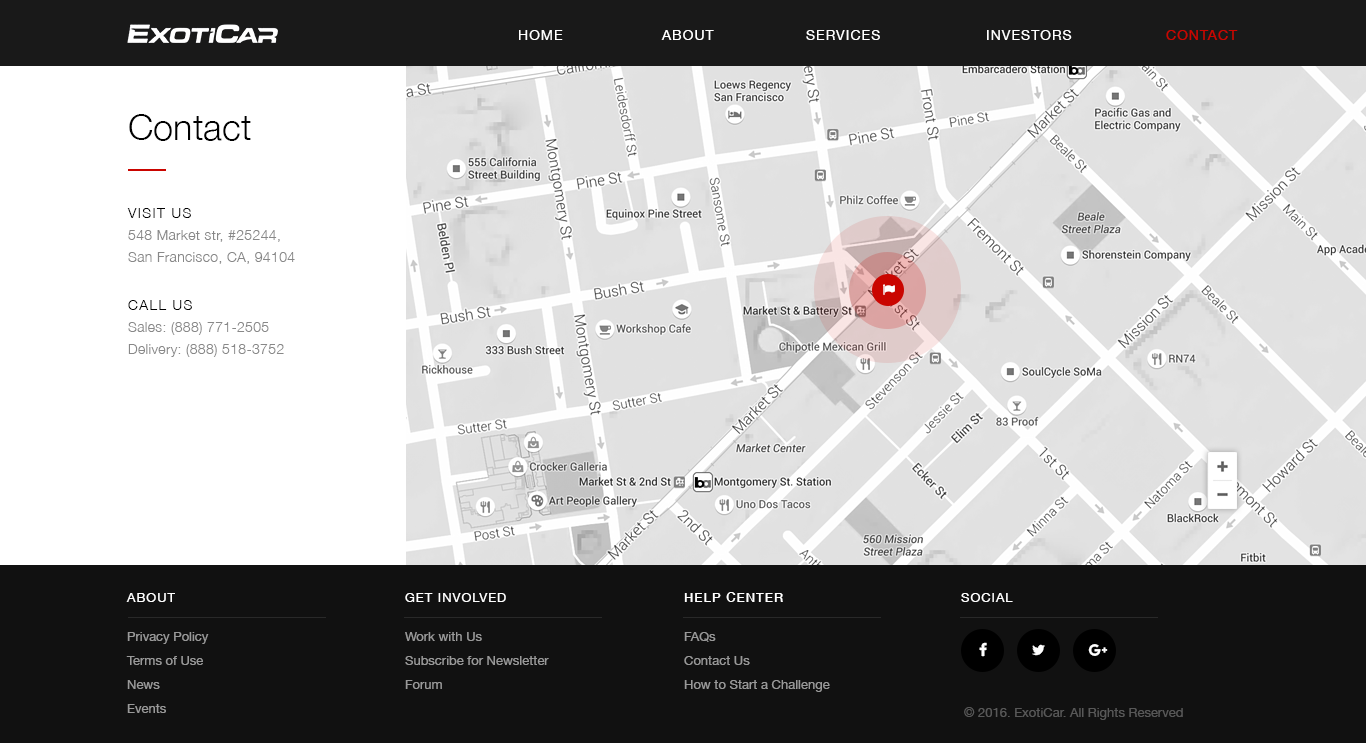
<style>
.page{position:relative;width:1366px;height:743px;background:#ffffff}
.page>*{position:absolute;margin:0}
.t1{font:14px "HelveticaNeue";letter-spacing:0.075em;color:#ffffff;text-transform:uppercase}
.t2{font:14px "HelveticaNeue";letter-spacing:0.075em;color:#ca0500;text-transform:uppercase}
.t3{font:14px/22px "HelveticaNeue-Light";letter-spacing:0.025em;color:#888888}
.t4{font:36px/24px "HelveticaNeue-Light";color:#000000}
.t5{font:14px/24px "HelveticaNeue-Light";letter-spacing:0.1em;color:#000000;text-transform:uppercase}
.t6{font:13px/24px "HelveticaNeue";color:#999999}
.t7{font:13px "HelveticaNeue";letter-spacing:0.075em;color:#ffffff;text-transform:uppercase}
.t8{font:13px "HelveticaNeue-Medium";letter-spacing:0.075em;color:#ffffff;text-transform:uppercase}
.t9{font:13px "HelveticaNeue";color:#585858}
</style>
<div class="page">
<p class="t1" style="left:519px;top:30px;width:719px;height:10px">Home   About   Services   investors   <span class="t2">Contact</span></p>
<p class="t3" style="left:127px;top:114px;width:168px;height:243px"><span class="t4">Contact<br><br></span><span class="t5">Visit us<br></span>548 Market str, #25244, <br>San Francisco, CA, 94104<br><br><span class="t5">Call us<br></span>Sales: (888) 771-2505<br>Delivery: (888) 518-3752</p>
<p class="t6" style="left:126px;top:593px;width:83px;height:120px"><span class="t7">About<br></span>Privacy Policy<br>Terms of Use<br>News<br>Events</p>
<p class="t6" style="left:405px;top:593px;width:144px;height:96px"><span class="t7">Get Involved<br></span>Work with Us<br>Subscribe for Newsletter<br>Forum</p>
<p class="t6" style="left:684px;top:592px;width:146px;height:100px"><span class="t8">Help Center<br></span>FAQs<br>Contact Us<br>How to Start a Challenge</p>
<p class="t7" style="left:961px;top:593px;width:52px;height:9px">Social</p>
<p class="t9" style="left:964px;top:707px;width:219px;height:13px">© 2016. ExotiCar. All Rights Reserved</p>
</div>
